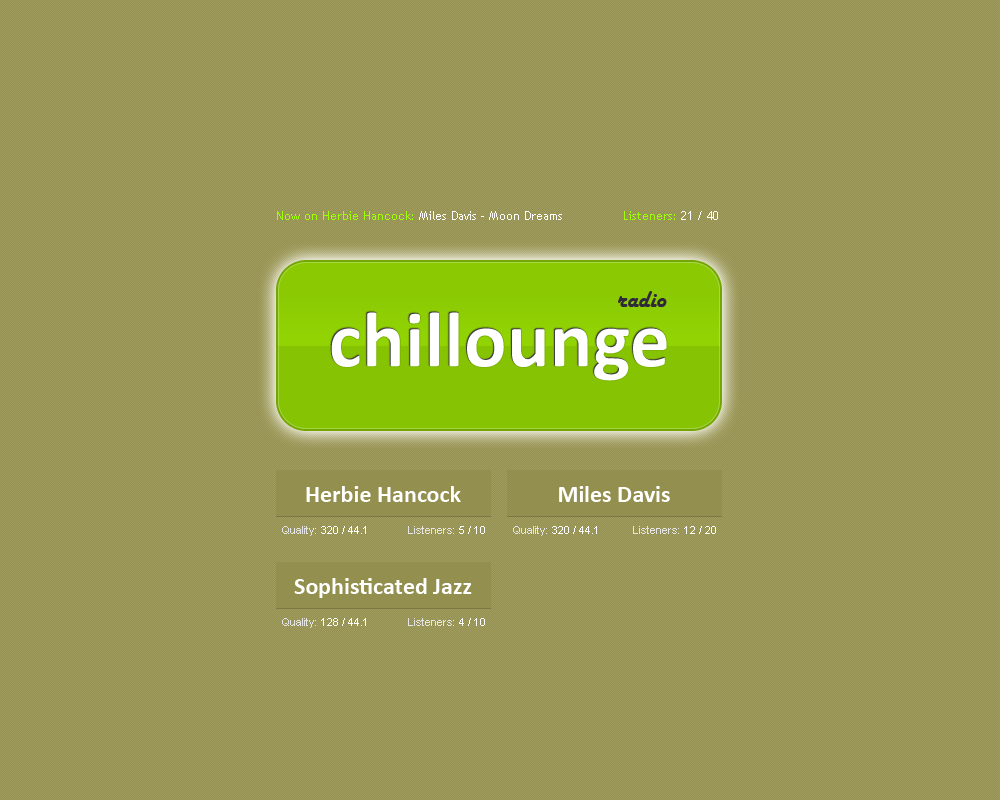
<style>
.page{position:relative;width:1000px;height:800px;background:#949051}
.page>*{position:absolute;margin:0}
.t1{font:12px "TrebuchetMS";color:#ffffff}
.t2{font:12px "TrebuchetMS";color:#9dff03}
.t3{font:24px "HarlowSolid";color:#302939}
.t4{font:80px "Calibri-Bold";color:#ffffff}
.t5{font:24px "Calibri-Bold";color:#ffffff}
.t6{font:11px "ArialMT";color:#ffffff}
.t7{font:11px "ArialMT";color:#e5e5e5}
.t8{font:11px "ArialMT";color:#fefefe}
</style>
<div class="page">
<p class="t1" style="left:277px;top:211px;width:285px;height:9px"><span class="t2">Now on Herbie Hancock: </span>Miles Davis - Moon Dreams</p>
<p class="t2" style="left:624px;top:211px;width:94px;height:9px">Listeners: <span class="t1">21 / 40</span></p>
<p class="t3" style="left:618px;top:291px;width:49px;height:16px">radio</p>
<p class="t4" style="left:330px;top:311px;width:337px;height:70px">chillounge</p>
<p class="t5" style="left:306px;top:486px;width:155px;height:16px">Herbie Hancock</p>
<p class="t5" style="left:559px;top:486px;width:111px;height:16px">Miles Davis</p>
<p class="t6" style="left:282px;top:526px;width:84px;height:10px"><span class="t7">Quality: </span>320 / 44.1</p>
<p class="t7" style="left:408px;top:526px;width:77px;height:8px">Listeners: <span class="t8">5 / 10</span></p>
<p class="t6" style="left:513px;top:526px;width:84px;height:10px"><span class="t7">Quality: </span>320 / 44.1</p>
<p class="t7" style="left:633px;top:526px;width:83px;height:8px">Listeners: <span class="t8">12 / 20</span></p>
<p class="t5" style="left:294px;top:578px;width:178px;height:20px">Sophisticated Jazz</p>
<p class="t6" style="left:282px;top:618px;width:84px;height:10px"><span class="t7">Quality: </span>128 / 44.1</p>
<p class="t7" style="left:408px;top:618px;width:77px;height:8px">Listeners: <span class="t8">4 / 10</span></p>
</div>
